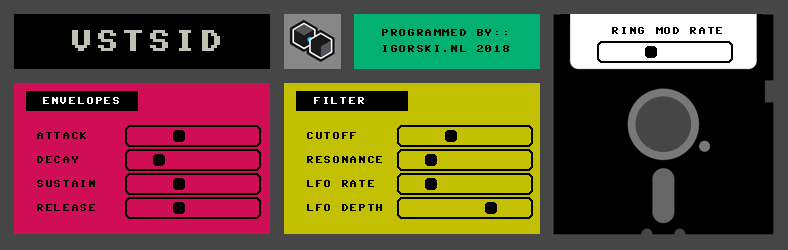
<style>
.page{position:relative;width:788px;height:250px;background:#000000}
.page>*{position:absolute;margin:0}
.t1{font:24px "CommodoreServer";letter-spacing:0.08em;color:#c1c1b3}
.t2{font:8px/16px "CommodoreServer";letter-spacing:0.075em;color:#000000}
.t3{font:8px "CommodoreServer";letter-spacing:0.08em;color:#000000}
.t4{font:8px "CommodoreServer";letter-spacing:0.08em;color:#ffffff}
.t5{font:8px/24px "CommodoreServer";letter-spacing:0.08em;color:#000000}
</style>
<div class="page">
<p class="t1" style="left:72px;top:30px;width:148px;height:21px">VSTSID</p>
<p class="t2" style="left:382px;top:29px;width:127px;height:23px">PROGRAMMED BY::<br>IGORSKI.NL 2018</p>
<p class="t3" style="left:612px;top:27px;width:110px;height:7px">RING MOD RATE</p>
<p class="t4" style="left:43px;top:97px;width:76px;height:7px">ENVELOPES</p>
<p class="t4" style="left:314px;top:97px;width:50px;height:7px">FILTER</p>
<p class="t5" style="left:37px;top:132px;width:58px;height:79px">ATTACK<br>DECAY<br>SUSTAIN<br>RELEASE</p>
<p class="t5" style="left:307px;top:132px;width:75px;height:79px">CUTOFF<br>RESONANCE<br>LFO RATE<br>LFO DEPTH</p>
</div>
